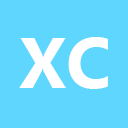
<style>
.page{position:relative;width:128px;height:128px;background:#5ed6fd}
.page>*{position:absolute;margin:0}
.t1{font:72px "Gadugi-Bold";color:#ffffff}
</style>
<div class="page">
<p class="t1" style="left:19px;top:37px;width:89px;height:52px">XC</p>
</div>
